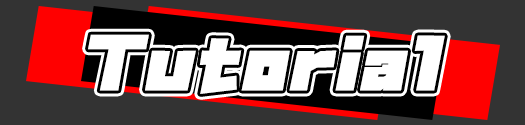
<style>
.page{position:relative;width:525px;height:125px;background:#333333}
.page>*{position:absolute;margin:0}
.t1{font:60px "GN-KMBFont-UB-OldstyleKana";letter-spacing:0.05em;color:#ffffff;font-style:italic;scale:1.1 1}
</style>
<div class="page">
<p class="t1" style="left:88px;top:34px;width:357px;height:60px">Tutorial</p>
</div>
